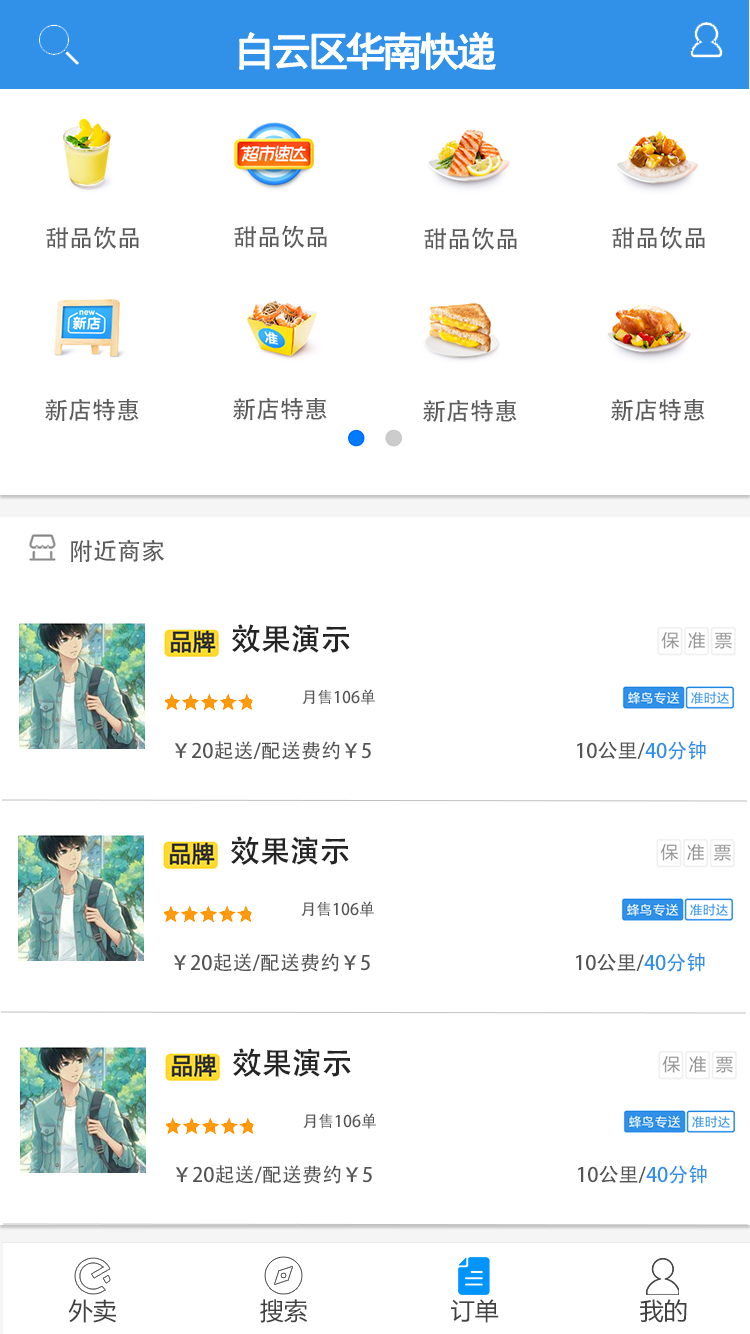
<style>
.page{position:relative;width:750px;height:1334px;background:#ffffff}
.page>*{position:absolute;margin:0}
.t1{font:40px "SimHei";letter-spacing:-0.1em;color:#ffffff;font-weight:bold}
.t2{font:24px "AdobeHeitiStd-Regular";color:#5d5c5c}
.t3{font:30px "AdobeHeitiStd-Regular";color:#242424}
.t4{font:16px "AdobeHeitiStd-Regular";color:#545454}
.t5{font:20px "AdobeHeitiStd-Regular";color:#545454}
.t6{font:20px "AdobeHeitiStd-Regular";color:#3090e9}
.t7{font:24px "MicrosoftYaHei";color:#414141}
</style>
<div class="page">
<p class="t1" style="left:239px;top:32px;width:257px;height:38px">白云区华南快递</p>
<p class="t2" style="left:46px;top:226px;width:93px;height:24px">甜品饮品</p>
<p class="t2" style="left:234px;top:225px;width:93px;height:24px">甜品饮品</p>
<p class="t2" style="left:424px;top:227px;width:93px;height:24px">甜品饮品</p>
<p class="t2" style="left:612px;top:226px;width:93px;height:24px">甜品饮品</p>
<p class="t2" style="left:45px;top:398px;width:94px;height:23px">新店特惠</p>
<p class="t2" style="left:233px;top:397px;width:94px;height:23px">新店特惠</p>
<p class="t2" style="left:423px;top:399px;width:94px;height:23px">新店特惠</p>
<p class="t2" style="left:611px;top:398px;width:94px;height:23px">新店特惠</p>
<p class="t2" style="left:71px;top:539px;width:93px;height:23px">附近商家</p>
<p class="t3" style="left:232px;top:624px;width:118px;height:29px">效果演示</p>
<p class="t4" style="left:302px;top:689px;width:73px;height:16px">月售106单</p>
<p class="t5" style="left:174px;top:741px;width:197px;height:19px">￥20起送/配送费约￥5</p>
<p class="t5" style="left:577px;top:741px;width:129px;height:19px">10公里/<span class="t6">40分钟</span></p>
<p class="t3" style="left:231px;top:836px;width:118px;height:29px">效果演示</p>
<p class="t4" style="left:301px;top:901px;width:73px;height:16px">月售106单</p>
<p class="t5" style="left:173px;top:953px;width:197px;height:19px">￥20起送/配送费约￥5</p>
<p class="t5" style="left:576px;top:953px;width:129px;height:19px">10公里/<span class="t6">40分钟</span></p>
<p class="t3" style="left:233px;top:1048px;width:118px;height:29px">效果演示</p>
<p class="t4" style="left:303px;top:1113px;width:73px;height:16px">月售106单</p>
<p class="t5" style="left:175px;top:1165px;width:197px;height:19px">￥20起送/配送费约￥5</p>
<p class="t5" style="left:578px;top:1165px;width:129px;height:19px">10公里/<span class="t6">40分钟</span></p>
<p class="t7" style="left:68px;top:1299px;width:48px;height:24px">外卖</p>
<p class="t7" style="left:260px;top:1299px;width:48px;height:24px">搜索</p>
<p class="t7" style="left:451px;top:1299px;width:48px;height:24px">订单</p>
<p class="t7" style="left:640px;top:1299px;width:47px;height:24px">我的</p>
</div>
